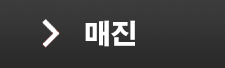
<style>
.page{position:relative;width:225px;height:68px}
.page>*{position:absolute;margin:0}
.t1{font:27px "AdobeGothicStd-Bold";color:#ffffff}
</style>
<div class="page">
<p class="t1" style="left:85px;top:20px;width:50px;height:27px">매진</p>
</div>
